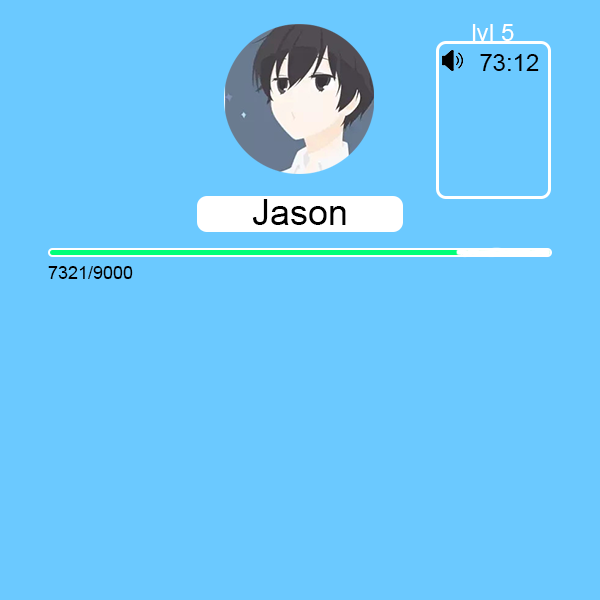
<style>
.page{position:relative;width:600px;height:600px;background:#6bc9ff}
.page>*{position:absolute;margin:0}
.t1{font:24px "ArialMT";letter-spacing:0.001em;color:#ffffff}
.t2{font:24px "ArialMT";letter-spacing:0.001em;color:#000000}
.t3{font:36px "ArialMT";letter-spacing:0.001em;color:#000000}
.t4{font:18px "ArialMT";letter-spacing:0.001em;color:#000000}
</style>
<div class="page">
<p class="t1" style="left:472px;top:24px;width:42px;height:17px">lvl 5</p>
<p class="t2" style="left:480px;top:54px;width:59px;height:17px">73:12</p>
<p class="t3" style="left:252px;top:199px;width:94px;height:26px">Jason</p>
<p class="t4" style="left:48px;top:266px;width:85px;height:13px">7321/9000</p>
</div>
